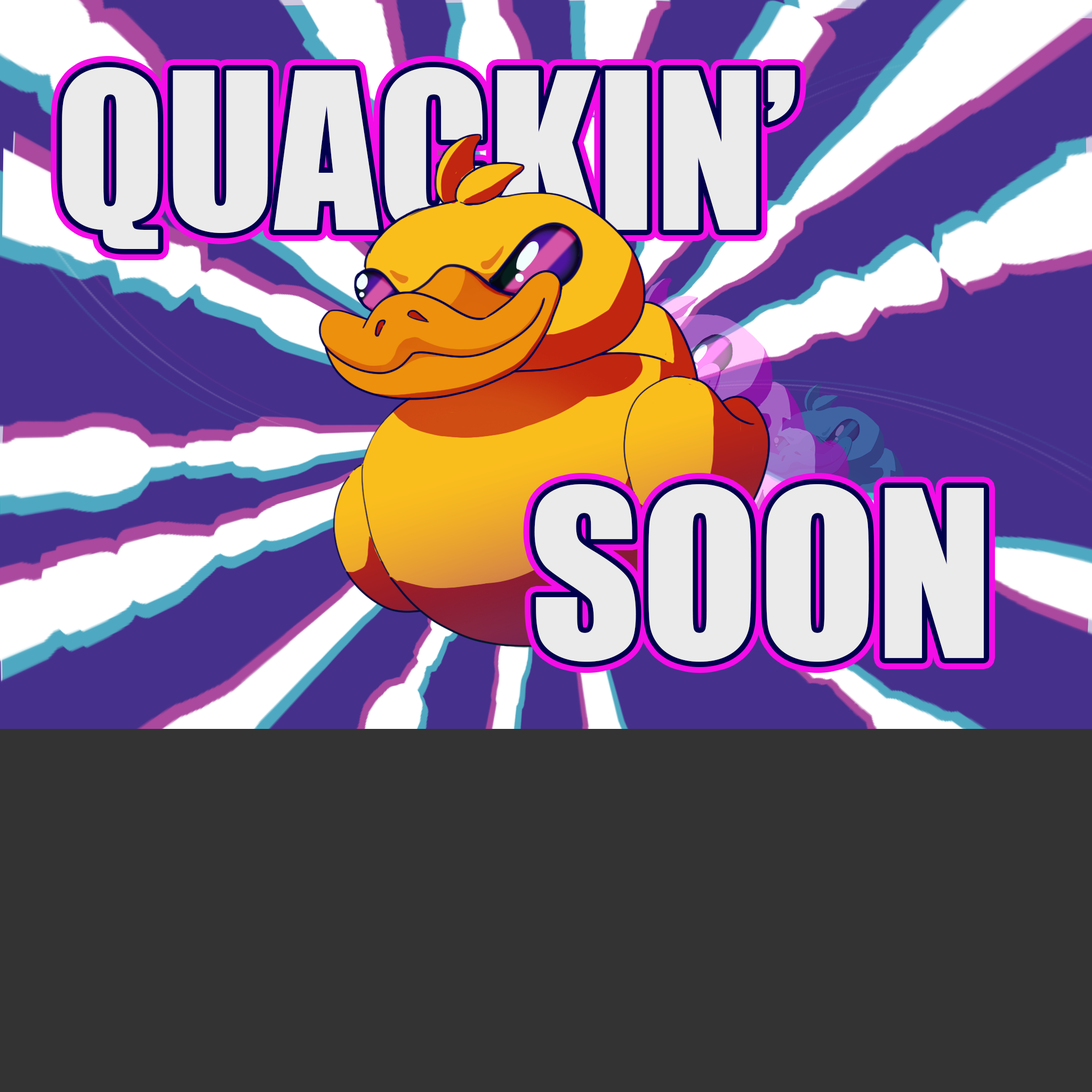
<style>
.page{position:relative;width:1092px;height:1092px;background:#333333}
.page>*{position:absolute;margin:0}
.t1{font:201.5px "Impact";color:#ebebeb}
.t2{font:215.3px "Impact";color:#ebebeb}
</style>
<div class="page">
<p class="t1" style="left:62px;top:67px;width:733px;height:182px">QUACKIN’</p>
<p class="t2" style="left:534px;top:484px;width:450px;height:178px">SOON</p>
</div>
